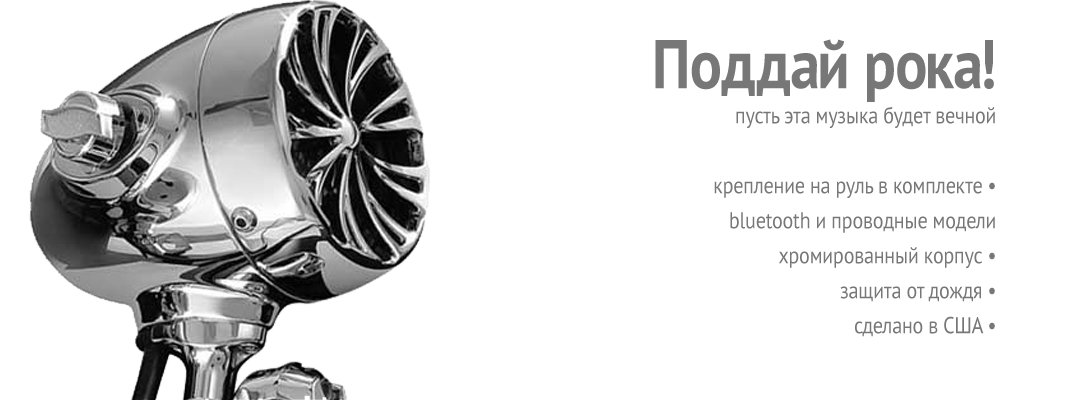
<style>
.page{position:relative;width:1067px;height:400px;background:#ffffff}
.page>*{position:absolute;margin:0}
.t1{font:23px/35px "PTSans-Regular";letter-spacing:-0.01em;color:#777777;scale:0.87 1}
.t2{font:69px/35px "PTSans-Bold";letter-spacing:-0.01em;color:#777777;scale:0.87 1}
</style>
<div class="page">
<p class="t1" style="left:655px;top:39px;width:340px;height:298px;text-align:right"><span class="t2">Поддай рока!<br></span>пусть эта музыка будет вечной<br><br>крепление на руль в комплекте •<br>bluetooth и проводные модели<br>хромированный корпус •<br>защита от дождя •<br>сделано в США •</p>
</div>
